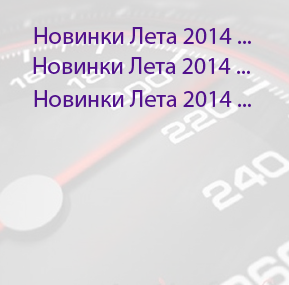
<style>
.page{position:relative;width:289px;height:285px}
.page>*{position:absolute;margin:0}
.t1{font:24px "MyriadPro-Regular";color:#51128c}
</style>
<div class="page">
<p class="t1" style="left:34px;top:27px;width:217px;height:17px">Новинки Лета 2014 ...</p>
<p class="t1" style="left:33px;top:57px;width:217px;height:17px">Новинки Лета 2014 ...</p>
<p class="t1" style="left:34px;top:90px;width:217px;height:17px">Новинки Лета 2014 ...</p>
</div>
